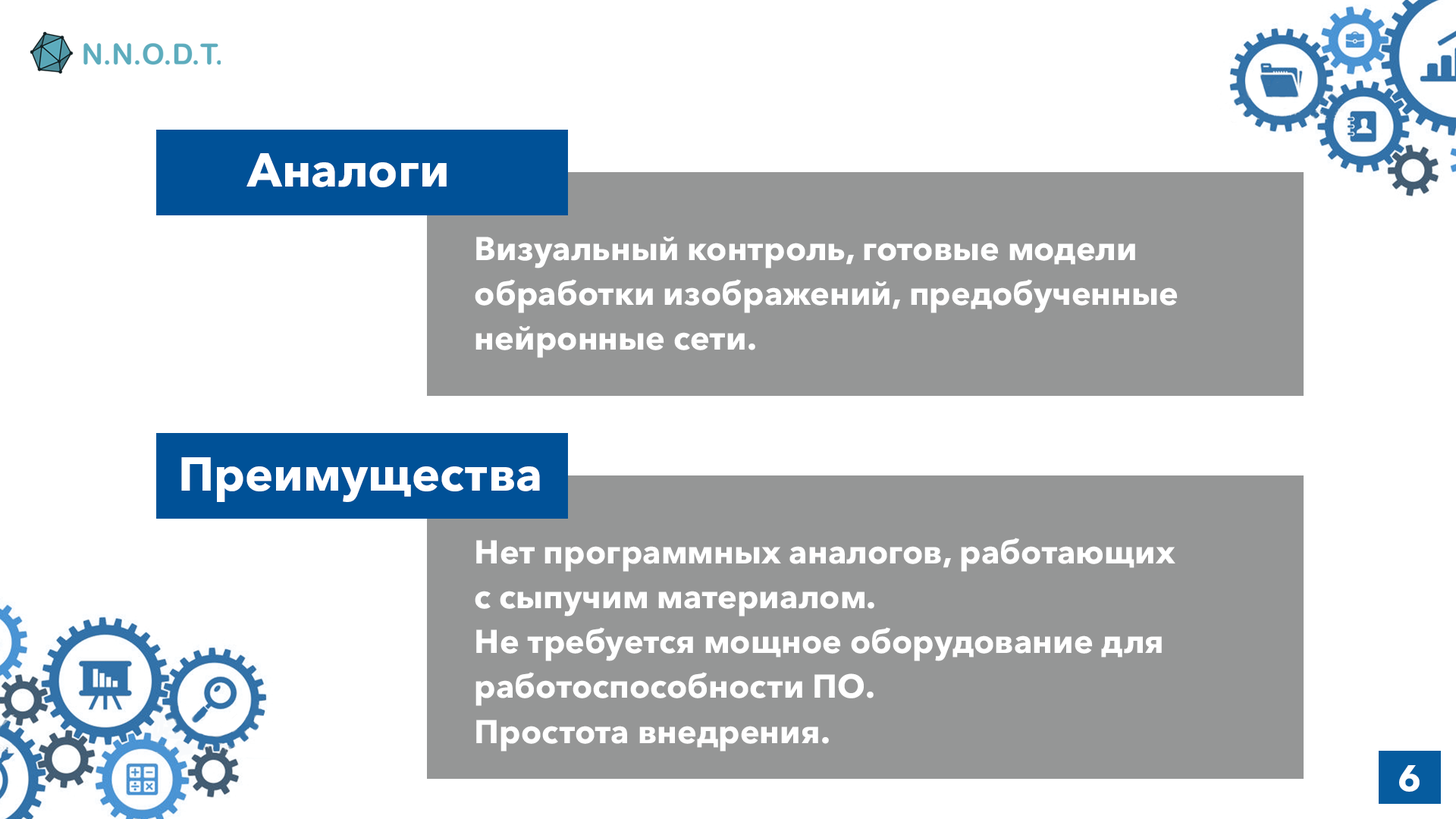
<style>
.page{position:relative;width:1456px;height:819px;background:#ffffff}
.page>*{position:absolute;margin:0}
.t1{font:47.3px "AvenirNextCyr-Bold";color:#ffffff}
.t2{font:32.9px/44.2px "AvenirNextCyr-Bold";color:#ffffff}
.t3{font:36.4px "AvenirNextCyr-Bold";color:#ffffff}
</style>
<div class="page">
<p class="t1" style="left:246px;top:153px;width:201px;height:34px">Аналоги</p>
<p class="t2" style="left:475px;top:237px;width:703px;height:121px">Визуальный контроль, готовые модели<br>обработки изображений, предобученные<br>нейронные сети.</p>
<p class="t1" style="left:181px;top:457px;width:359px;height:45px">Преимущества</p>
<p class="t2" style="left:475px;top:538px;width:700px;height:213px">Нет программных аналогов, работающих<br>с сыпучим материалом.<br>Не требуется мощное оборудование для<br>работоспособности ПО.<br>Простота внедрения.</p>
<p class="t3" style="left:1399px;top:765px;width:21px;height:27px">6</p>
</div>
